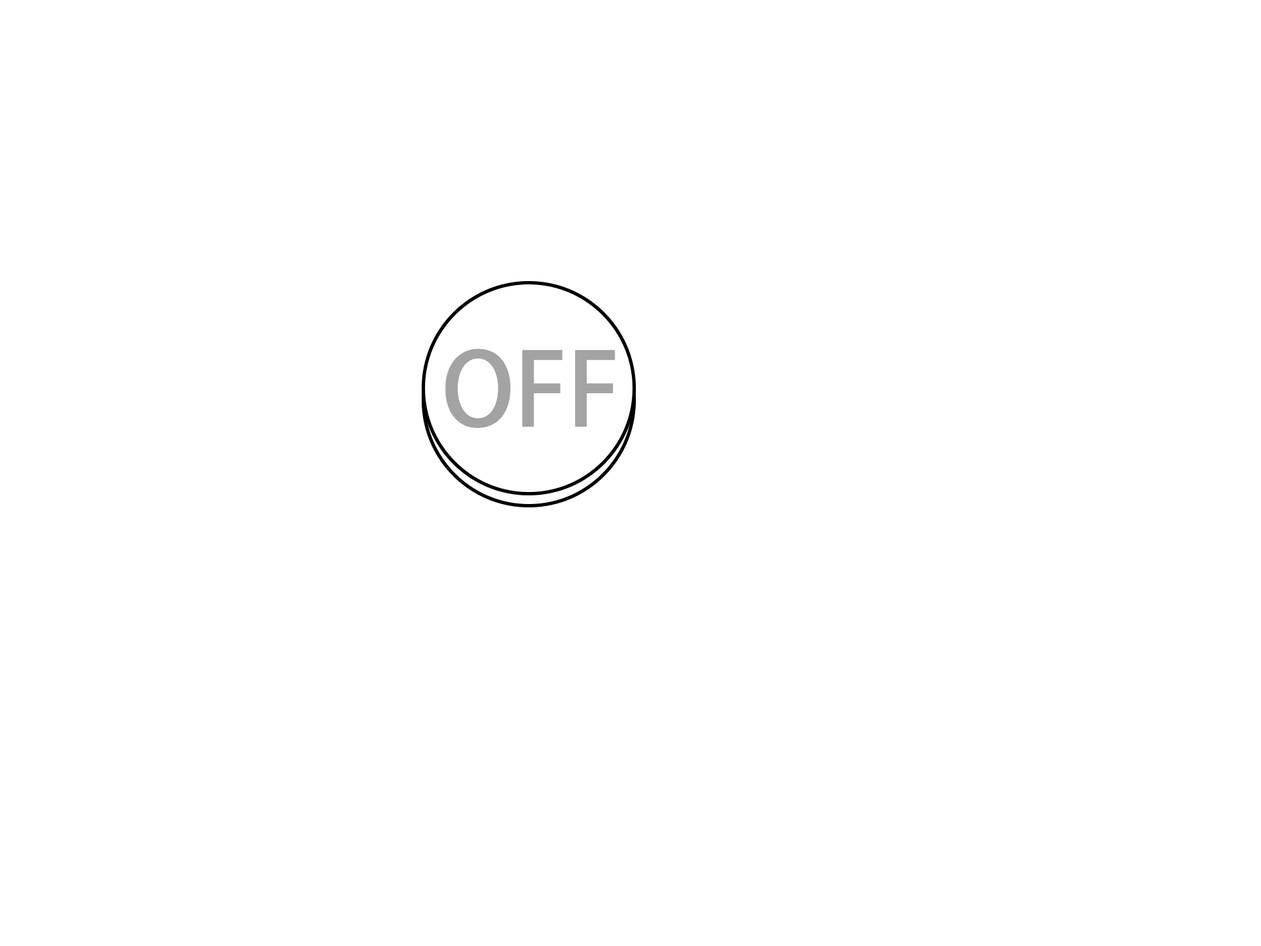
<style>
.page{position:relative;width:1261px;height:946px;background:#ffffff}
.page>*{position:absolute;margin:0}
.t1{font:100.1px "AdobeHeitiStd-Regular";color:#a3a3a3}
</style>
<div class="page">
<p class="t1" style="left:445px;top:348px;width:170px;height:80px">OFF</p>
</div>
